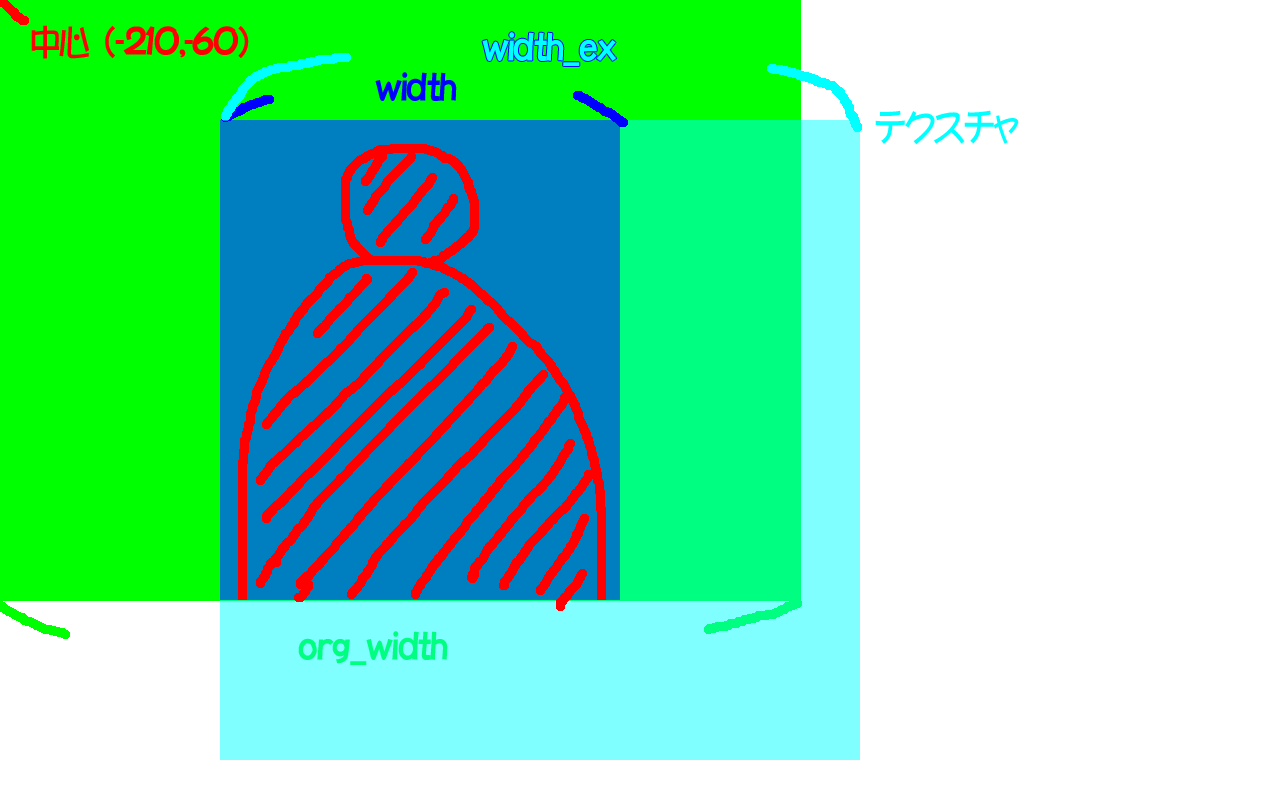
<style>
.page{position:relative;width:1280px;height:800px;background:#ffffff}
.page>*{position:absolute;margin:0}
.t1{font:36px "DFPOP1-SB-WINP-RKSJ-H";color:#ff0000;scale:0.9 1}
.t2{font:36px "DFPOP1-SB-WINP-RKSJ-H";color:#00ffff;scale:0.9 1}
.t3{font:36px "DFPOP1-SB-WINP-RKSJ-H";color:#0000ff;scale:0.9 1}
.t4{font:36px "DFPOP1-SB-WINP-RKSJ-H";color:#00ff80;scale:0.9 1}
</style>
<div class="page">
<p class="t1" style="left:31px;top:25px;width:218px;height:34px">中心（-210, -60）</p>
<p class="t2" style="left:482px;top:32px;width:135px;height:34px">width_ex</p>
<p class="t3" style="left:375px;top:72px;width:82px;height:29px">width</p>
<p class="t2" style="left:875px;top:110px;width:144px;height:35px">テクスチャ</p>
<p class="t4" style="left:298px;top:631px;width:150px;height:34px">org_width</p>
</div>
